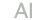
<style>
.page{position:relative;width:50px;height:20px;background:#ffffff}
.page>*{position:absolute;margin:0}
.t1{font:20px "Thonburi-Bold";color:#b3b9b4}
</style>
<div class="page">
<p class="t1" style="left:14px;top:2px;width:18px;height:16px">AI</p>
</div>
